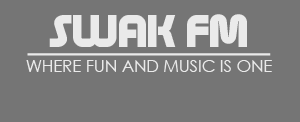
<style>
.page{position:relative;width:300px;height:122px;background:#757575}
.page>*{position:absolute;margin:0}
.t1{font:45.8px "Age";color:#eaeaea;text-decoration:underline}
.t2{font:16.7px "CenturyGothic";color:#eaeaea}
</style>
<div class="page">
<p class="t1" style="left:27px;top:14px;width:244px;height:42px">SWAK FM</p>
<p class="t2" style="left:26px;top:60px;width:246px;height:12px">WHERE FUN AND MUSIC IS ONE</p>
</div>
